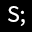
<style>
.page{position:relative;width:32px;height:32px;background:#000000}
.page>*{position:absolute;margin:0}
.t1{font:24px "SourceSansPro-Regular";color:#ffffff}
</style>
<div class="page">
<p class="t1" style="left:8px;top:6px;width:17px;height:20px">S;</p>
</div>
